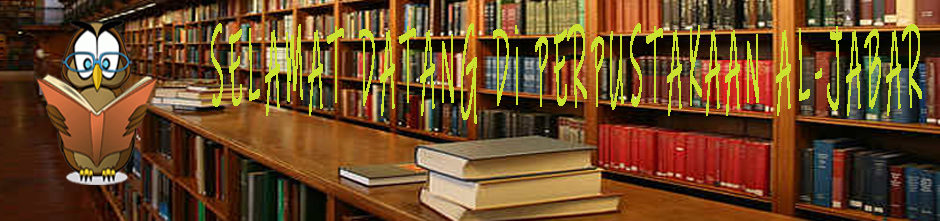
<style>
.page{position:relative;width:940px;height:221px}
.page>*{position:absolute;margin:0}
.t1{font:111.6px "InkFree";letter-spacing:0.18em;color:#cae12f;font-weight:bold;scale:0.21 1}
</style>
<div class="page">
<p class="t1" style="left:211px;top:23px;width:711px;height:101px">SELAMAT DATANG Di PERPUSTAKAAN AL-JABAR</p>
</div>
